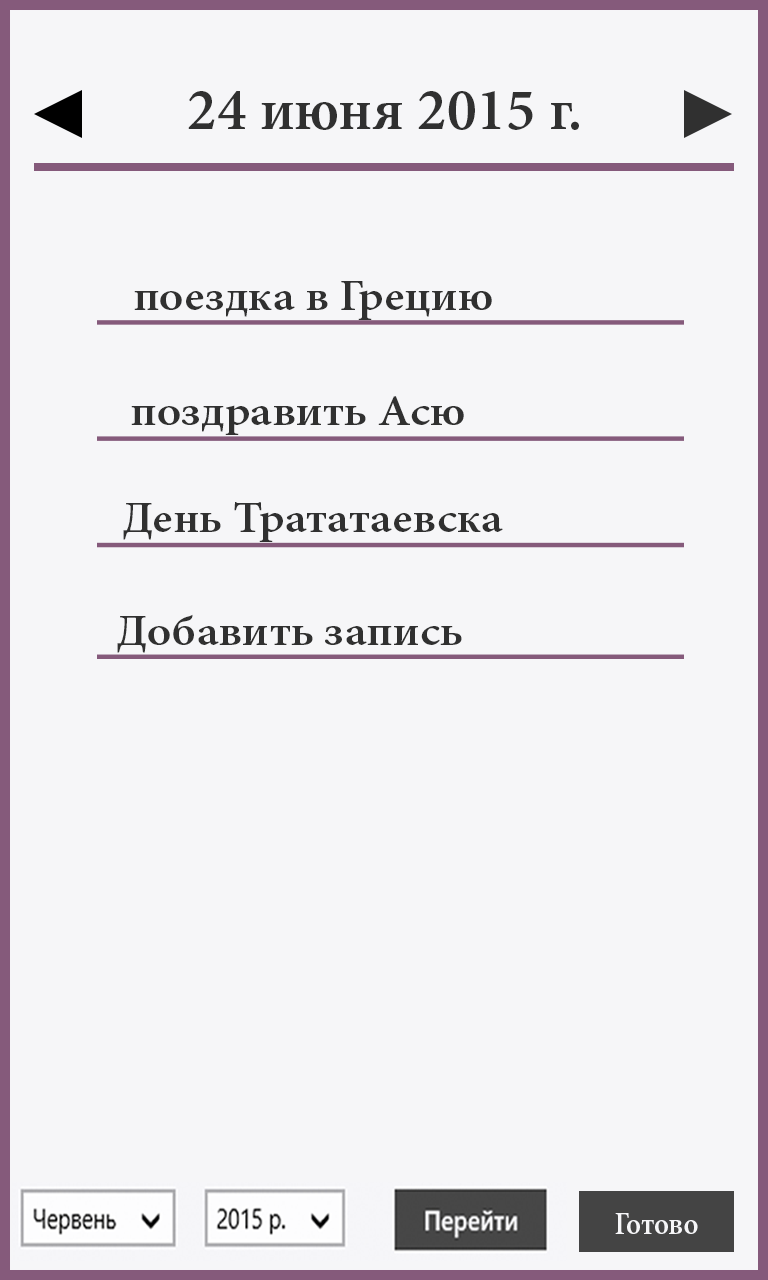
<style>
.page{position:relative;width:768px;height:1280px;background:#f6f6f8}
.page>*{position:absolute;margin:0}
.t1{font:60px "MinionPro-Semibold";color:#303030}
.t2{font:42.9px "MinionPro-Semibold";color:#303030;scale:1.09 1}
.t3{font:31.7px "MinionPro-Semibold";color:#f6f6f8;scale:0.9 1}
</style>
<div class="page">
<p class="t1" style="left:188px;top:91px;width:391px;height:39px">24 июня 2015 г.</p>
<p class="t2" style="left:134px;top:281px;width:358px;height:39px">поездка в Грецию</p>
<p class="t2" style="left:131px;top:396px;width:333px;height:39px">поздравить Асю</p>
<p class="t2" style="left:123px;top:502px;width:380px;height:40px">День Трататаевска</p>
<p class="t2" style="left:117px;top:614px;width:345px;height:39px">Добавить запись</p>
<p class="t3" style="left:615px;top:1213px;width:83px;height:21px">Готово</p>
</div>
